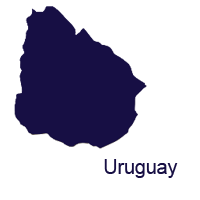
<style>
.page{position:relative;width:200px;height:200px;background:#ffffff}
.page>*{position:absolute;margin:0}
.t1{font:20.8px "ArialMT";color:#170f44;scale:0.94 1}
</style>
<div class="page">
<p class="t1" style="left:104px;top:159px;width:74px;height:19px">Uruguay</p>
</div>
